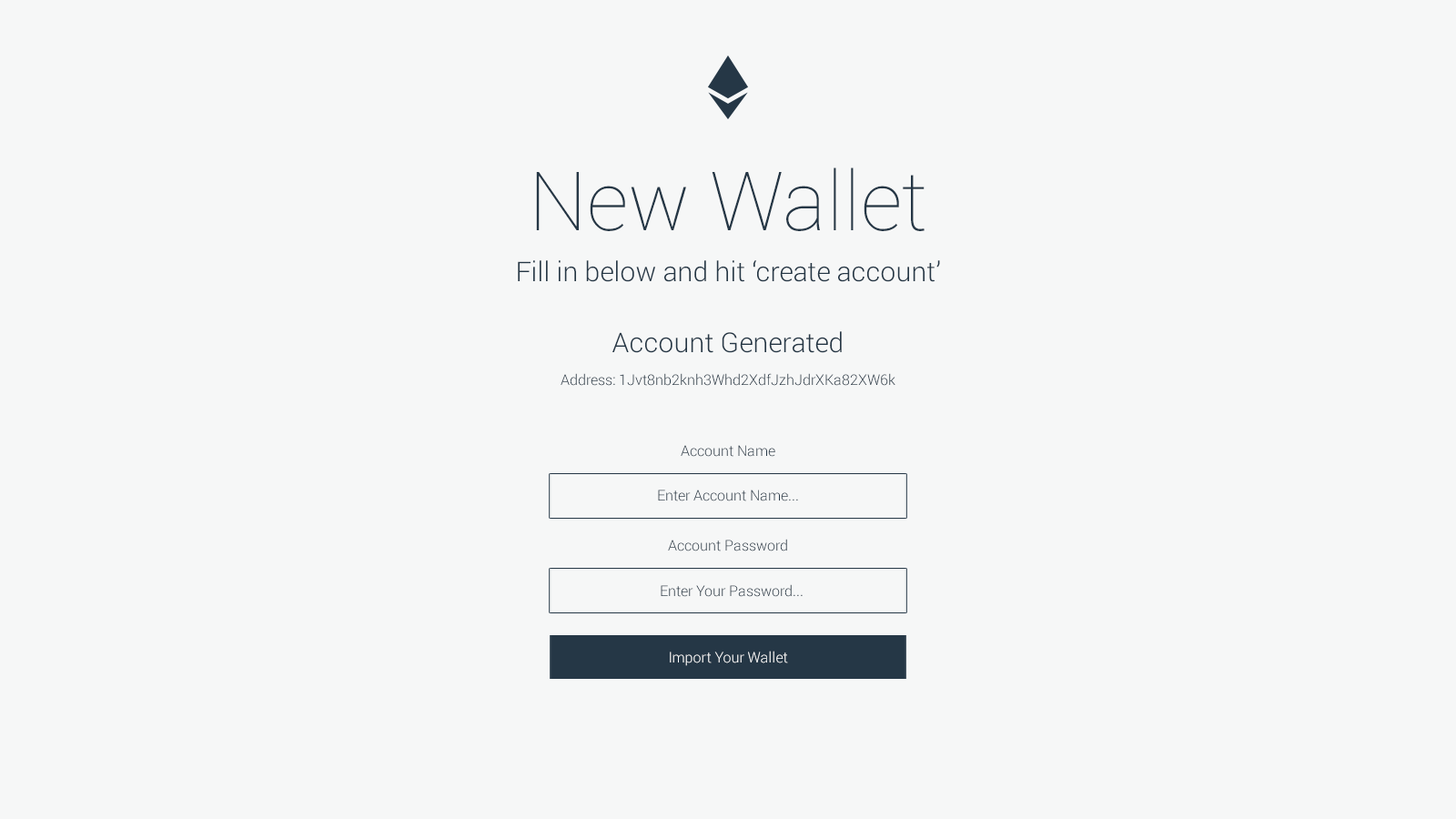
<style>
.page{position:relative;width:1456px;height:819px;background:#f6f7f7}
.page>*{position:absolute;margin:0}
.t1{font:81.9px "Roboto-Thin";color:#253746}
.t2{font:27.3px "Roboto-Light";color:#253746}
.t3{font:14.6px/32.8px "Roboto-Light";color:#253746}
.t4{font:27.3px/32.8px "Roboto-Light";color:#253746}
.t5{font:14.6px "Roboto-Light";color:#253746}
.t6{font:14.6px "Roboto-Light";color:#ffffff}
</style>
<div class="page">
<p class="t1" style="left:536px;top:167px;width:389px;height:64px">New Wallet</p>
<p class="t2" style="left:518px;top:260px;width:422px;height:22px">Fill in below and hit ‘create account’</p>
<p class="t3" style="left:561px;top:331px;width:334px;height:55px;text-align:center"><span class="t4">Account Generated<br></span>Address: 1Jvt8nb2knh3Whd2XdfJzhJdrXKa82XW6k</p>
<p class="t5" style="left:681px;top:445px;width:94px;height:12px">Account Name</p>
<p class="t5" style="left:658px;top:490px;width:140px;height:11px">Enter Account Name...</p>
<p class="t5" style="left:668px;top:539px;width:119px;height:12px">Account Password</p>
<p class="t5" style="left:661px;top:584px;width:142px;height:13px">Enter Your Password...</p>
<p class="t6" style="left:670px;top:651px;width:118px;height:15px">Import Your Wallet</p>
</div>
